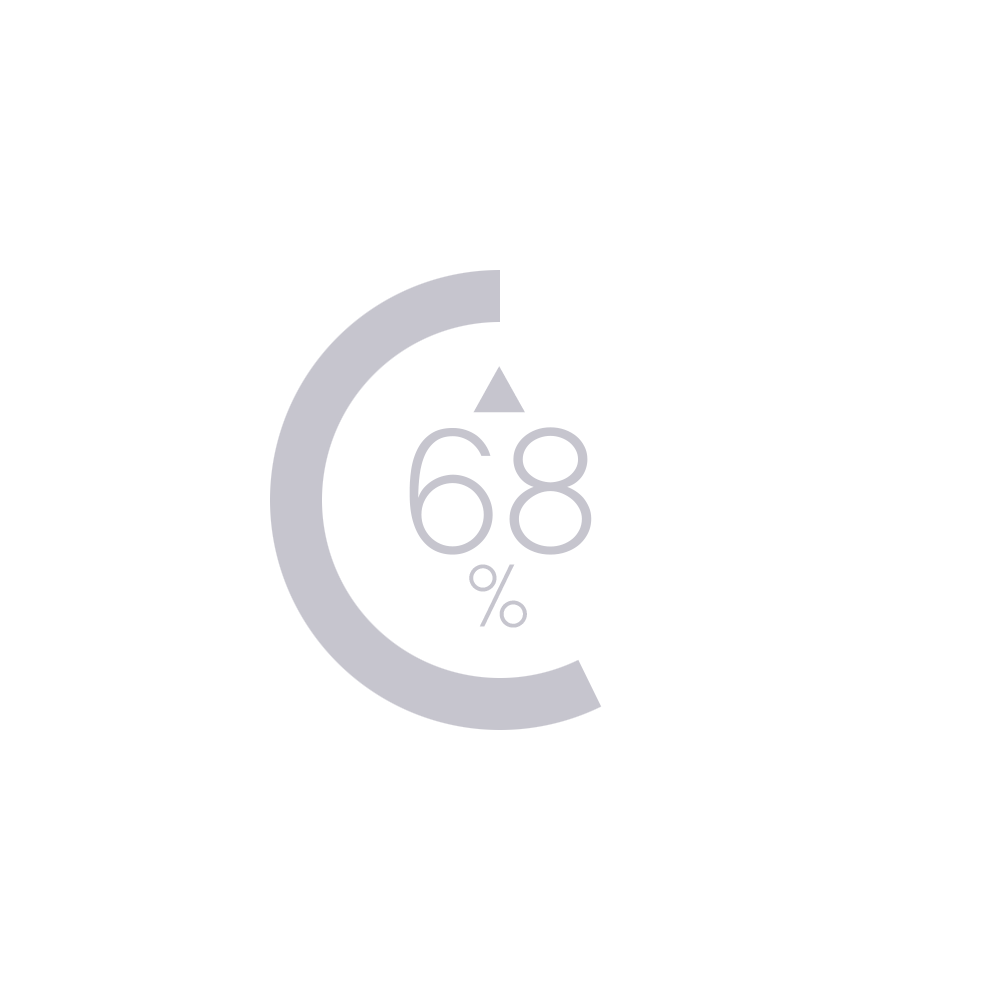
<style>
.page{position:relative;width:1000px;height:1000px;background:#ffffff}
.page>*{position:absolute;margin:0}
.t1{font:160px/141px "THEJung120";color:#c6c5ce}
.t2{font:72px "THEJung120";color:#c6c5ce}
.t3{font:80px/72px "THEJung120";color:#c6c5ce}
</style>
<div class="page">
<p class="t1" style="left:409px;top:366px;width:183px;height:262px;text-align:center"><span class="t2">▲<br></span>68<br><span class="t3">%</span></p>
</div>
